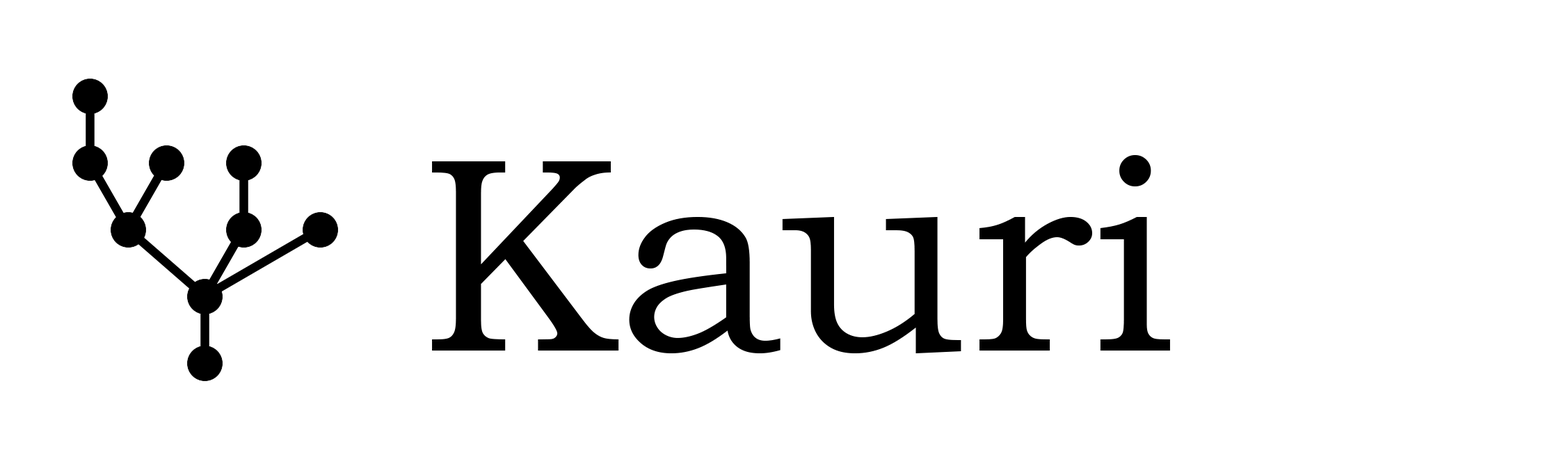
<style>
.page{position:relative;width:1568px;height:459px;background:#ffffff}
.page>*{position:absolute;margin:0}
.t1{font:278.3px "BookmanOldStyle";color:#000000}
</style>
<div class="page">
<p class="t1" style="left:432px;top:155px;width:738px;height:198px">Kauri</p>
</div>
